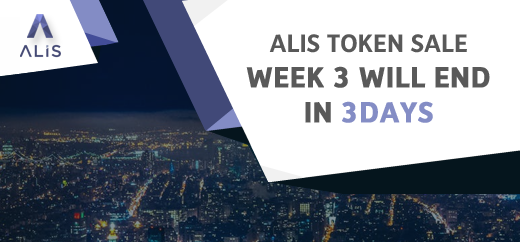
<style>
.page{position:relative;width:520px;height:242px;background:#ffffff}
.page>*{position:absolute;margin:0}
.t1{font:29.1px/35.2px "Depot-Bold";color:#595959;text-transform:uppercase;font-weight:bold}
.t2{font:25.5px/35.2px "Depot-Bold";color:#595959;text-transform:uppercase}
.t3{font:29.1px/35.2px "Depot-Bold";color:#848dc5;text-transform:uppercase;font-weight:bold}
</style>
<div class="page">
<p class="t1" style="left:246px;top:34px;width:244px;height:89px;text-align:center"><span class="t2">ALIS TOKEN SALE<br></span>WEEK 3 WILL END<br>in <span class="t3">3days</span></p>
</div>
